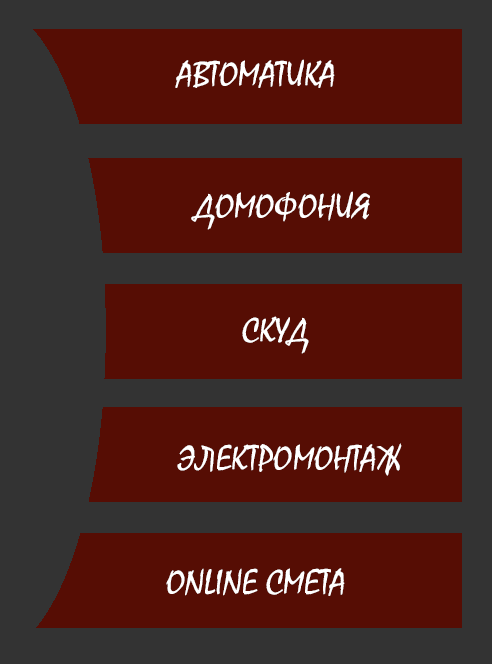
<style>
.page{position:relative;width:492px;height:664px;background:#560d04}
.page>*{position:absolute;margin:0}
.t1{font:36px "Mistral";color:#ffffff}
</style>
<div class="page">
<p class="t1" style="left:175px;top:59px;width:160px;height:29px">АВТОМАТИКА</p>
<p class="t1" style="left:191px;top:191px;width:179px;height:39px">ДОМОФОНИЯ</p>
<p class="t1" style="left:242px;top:316px;width:67px;height:38px">СКУД</p>
<p class="t1" style="left:177px;top:443px;width:225px;height:33px">ЭЛЕКТРОМОНТАЖ</p>
<p class="t1" style="left:166px;top:568px;width:179px;height:28px">ONLINE СМЕТА</p>
</div>
